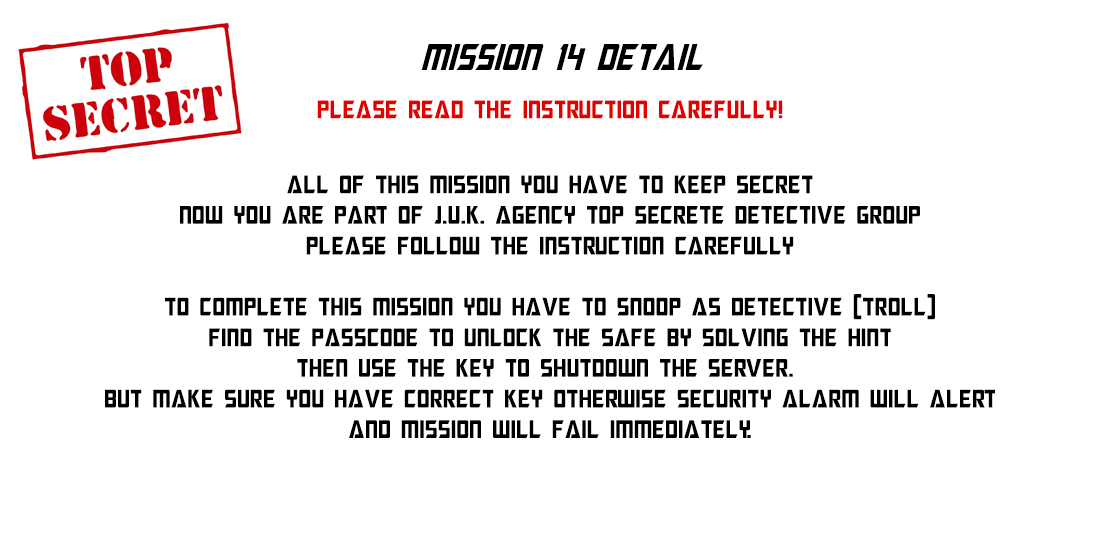
<style>
.page{position:relative;width:1100px;height:550px;background:#ffffff}
.page>*{position:absolute;margin:0}
.t1{font:37.1px "MegatronCondensed-Italic";color:#000000}
.t2{font:25.5px "MegatronCondensed";color:#e50000}
.t3{font:25.5px "MegatronCondensed";color:#000000}
</style>
<div class="page">
<p class="t1" style="left:421px;top:44px;width:282px;height:26px">mission 14 detail</p>
<p class="t2" style="left:317px;top:100px;width:466px;height:19px">please read the instruction carefully!</p>
<p class="t3" style="left:105px;top:175px;width:890px;height:263px;text-align:center">ALL Of this mission you have to keep secret<br>now you are part of j.u.k. agency top secrete detective group<br>please follow the instruction carefully<br><br>to complete this mission you have to Snoop as detective (troll)<br>find the passcode to unlock the safe by solving the hint<br>then use the key to shutdown the server. <br>but make sure you have correct key otherwise security alarm will alert<br>and mission will fail immediately.</p>
</div>
